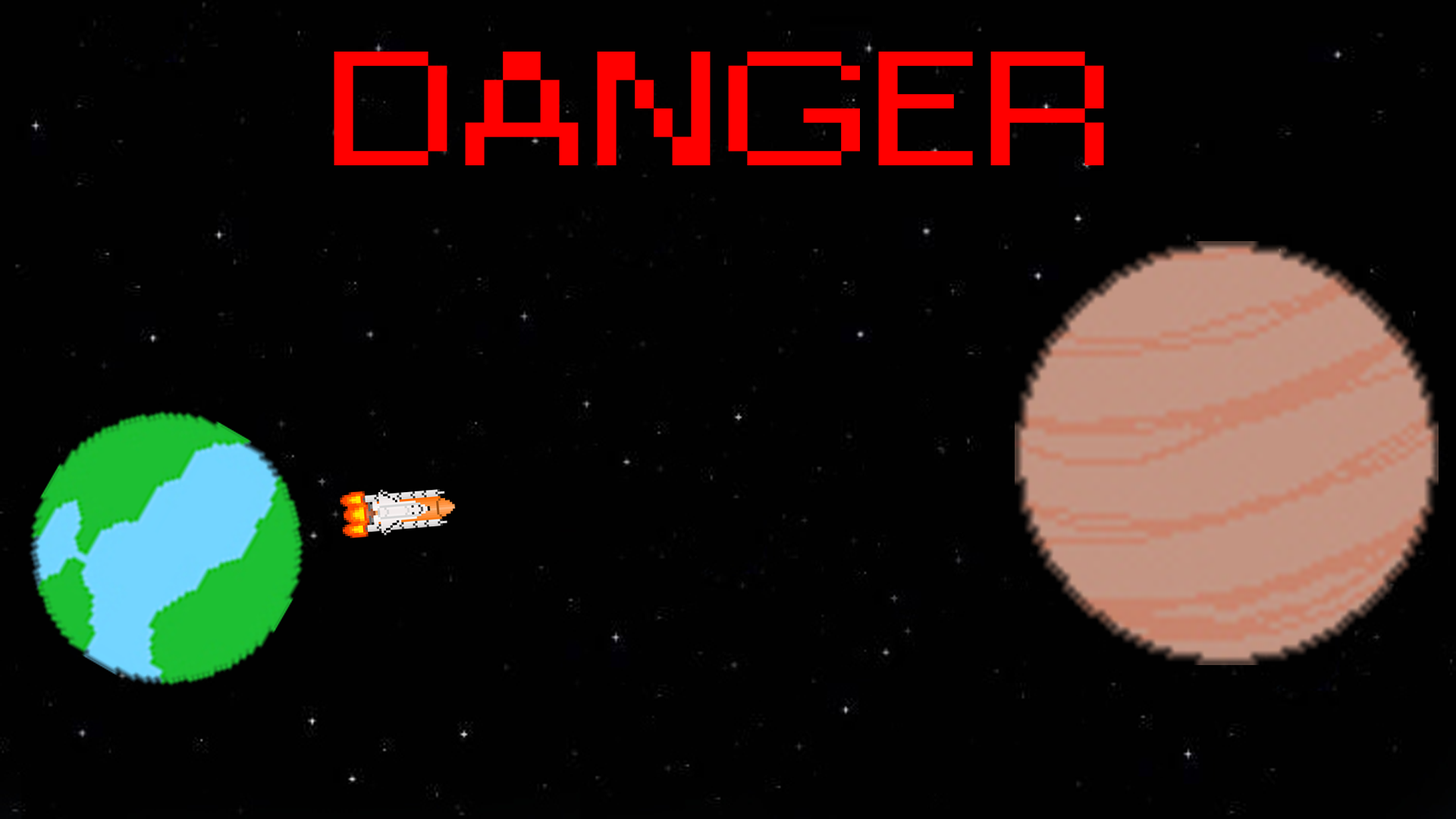
<style>
.page{position:relative;width:1456px;height:819px;background:#010101}
.page>*{position:absolute;margin:0}
.t1{font:151.6px "Small Fonts";color:#ff0000;scale:1.58 1}
</style>
<div class="page">
<p class="t1" style="left:334px;top:52px;width:770px;height:113px">DANGER</p>
</div>
